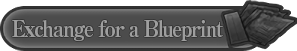
<style>
.page{position:relative;width:297px;height:51px}
.page>*{position:absolute;margin:0}
.t1{font:23px "RyuminPro-ExBold";letter-spacing:-0.08em;color:#9e9e9e;scale:0.9 1}
</style>
<div class="page">
<p class="t1" style="left:12px;top:20px;width:211px;height:21px">Exchange for a Blueprint</p>
</div>
